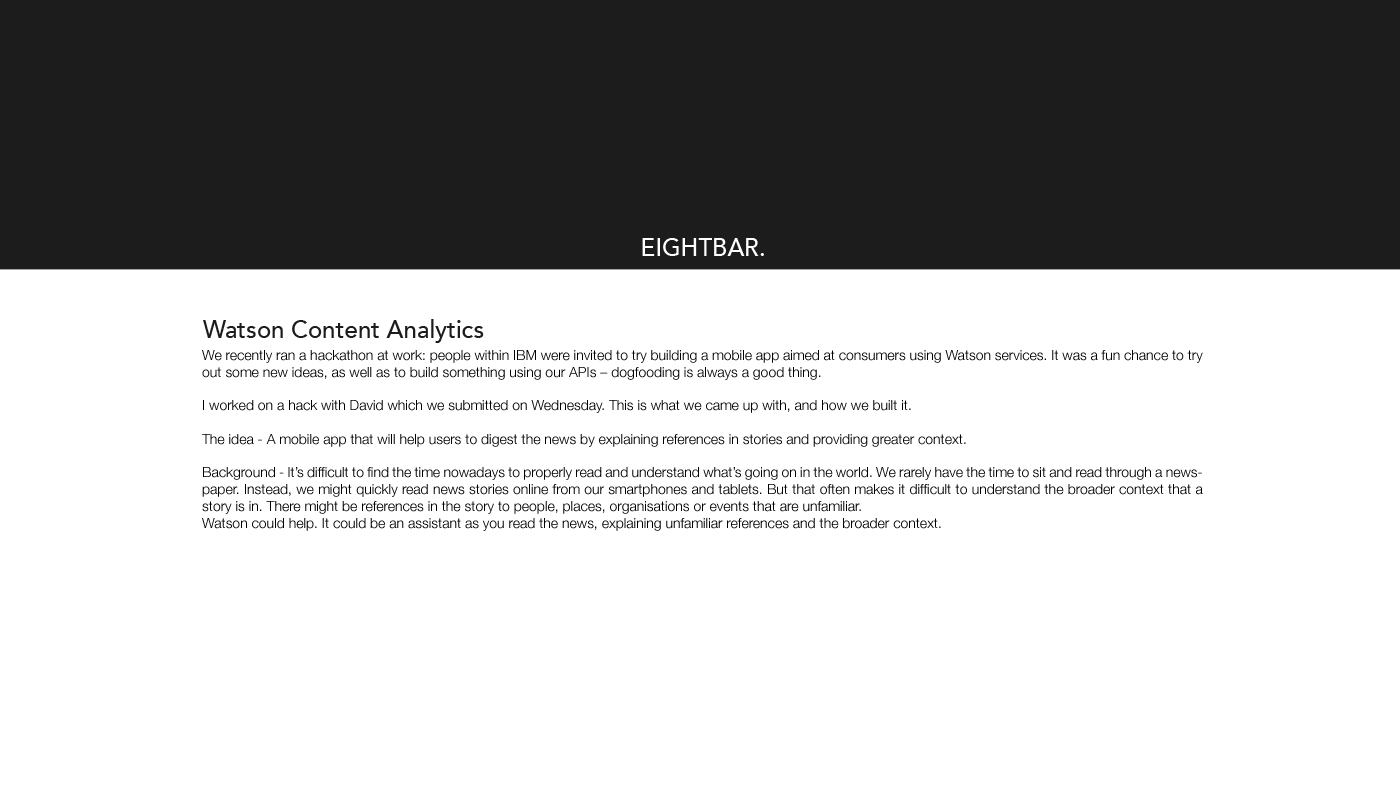
<style>
.page{position:relative;width:1400px;height:800px;background:#ffffff}
.page>*{position:absolute;margin:0}
.t1{font:24px "Avenir-Medium";color:#ffffff}
.t2{font:24px "Avenir-Medium";color:#1c1c1c}
.t3{font:14px "HelveticaNeue-Light";color:#000000}
</style>
<div class="page">
<p class="t1" style="left:642px;top:238px;width:122px;height:18px">EIGHTBAR.</p>
<p class="t2" style="left:203px;top:319px;width:281px;height:24px">Watson Content Analytics</p>
<p class="t3" style="left:202px;top:350px;width:1001px;height:181px;text-align:justify">We recently ran a hackathon at work: people within IBM were invited to try building a mobile app aimed at consumers using Watson services. It was a fun chance to try out some new ideas, as well as to build something using our APIs – dogfooding is always a good thing.<br><br>I worked on a hack with David which we submitted on Wednesday. This is what we came up with, and how we built it.<br><br>The idea - A mobile app that will help users to digest the news by explaining references in stories and providing greater context.<br><br>Background - It’s difficult to find the time nowadays to properly read and understand what’s going on in the world. We rarely have the time to sit and read through a newspaper. Instead, we might quickly read news stories online from our smartphones and tablets. But that often makes it difficult to understand the broader context that a story is in. There might be references in the story to people, places, organisations or events that are unfamiliar.<br>Watson could help. It could be an assistant as you read the news, explaining unfamiliar references and the broader context.</p>
</div>
